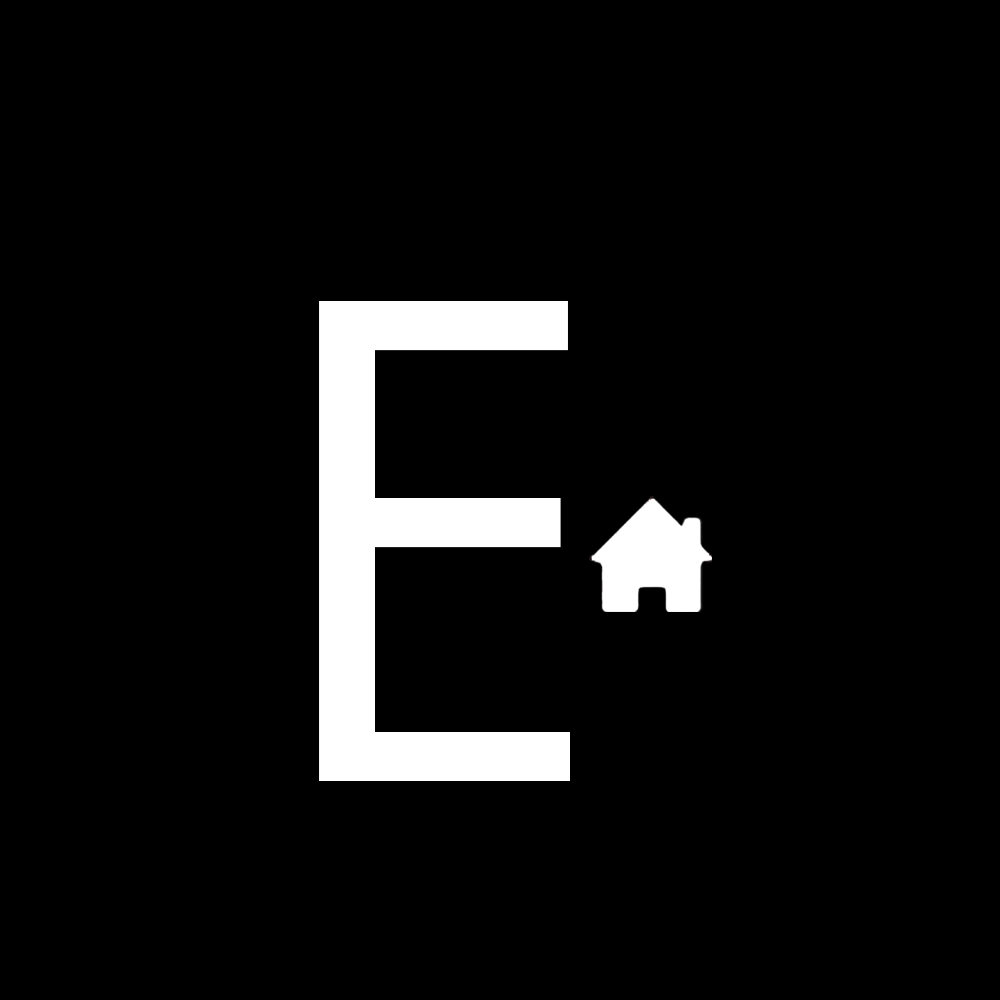
<style>
.page{position:relative;width:1000px;height:1000px;background:#000000}
.page>*{position:absolute;margin:0}
.t1{font:696.7px "AndaleMono";color:#ffffff}
</style>
<div class="page">
<p class="t1" style="left:319px;top:301px;width:251px;height:480px">E</p>
</div>
